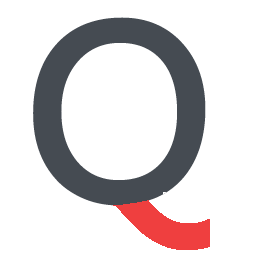
<style>
.page{position:relative;width:256px;height:256px;background:#ffffff}
.page>*{position:absolute;margin:0}
.t1{font:250px "Ebrima";color:#454b52;font-weight:bold}
</style>
<div class="page">
<p class="t1" style="left:33px;top:17px;width:177px;height:233px">Q</p>
</div>
